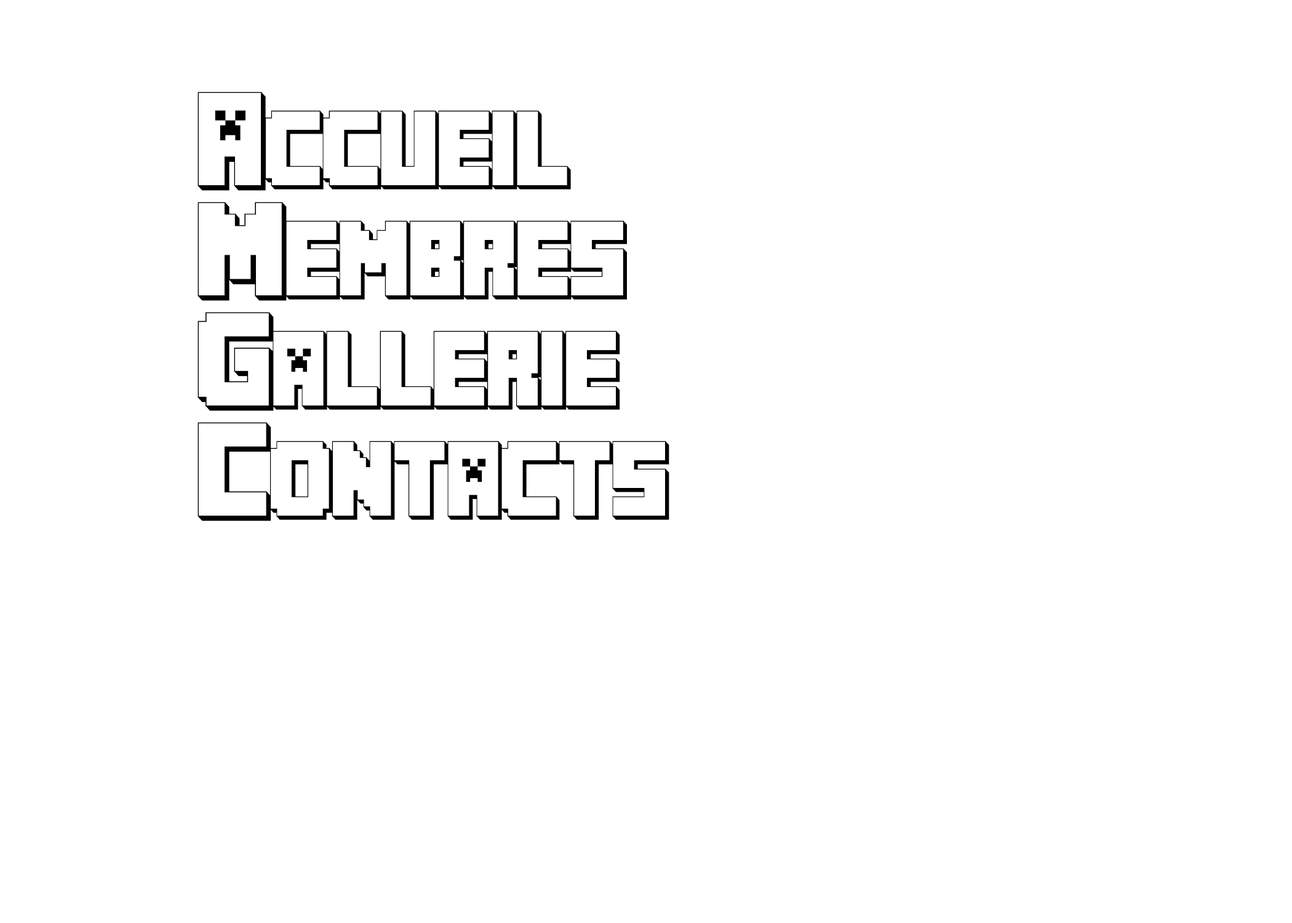
<style>
.page{position:relative;width:1292px;height:923px;background:#ffffff}
.page>*{position:absolute;margin:0}
.t1{font:92.3px "MINECRAFTPE";letter-spacing:-0.075em;color:#000000}
</style>
<div class="page">
<p class="t1" style="left:197px;top:92px;width:374px;height:99px">Accueil</p>
<p class="t1" style="left:197px;top:202px;width:430px;height:99px">Membres</p>
<p class="t1" style="left:197px;top:312px;width:423px;height:99px">Gallerie</p>
<p class="t1" style="left:197px;top:422px;width:472px;height:99px">Contacts</p>
</div>
